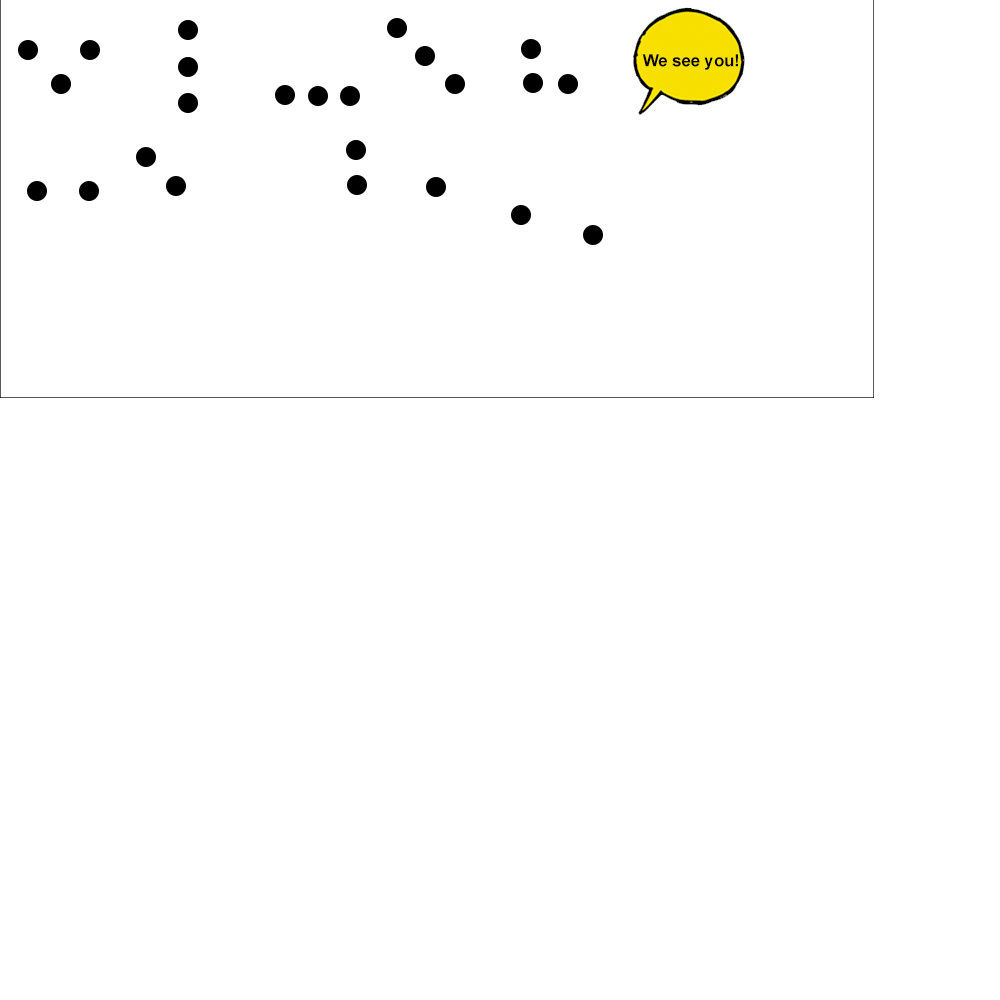
<style>
.page{position:relative;width:1000px;height:1000px;background:#ffffff}
.page>*{position:absolute;margin:0}
.t1{font:16.7px "Arial-BoldMT";color:#000000}
</style>
<div class="page">
<p class="t1" style="left:642px;top:54px;width:96px;height:16px">We see you!</p>
</div>
